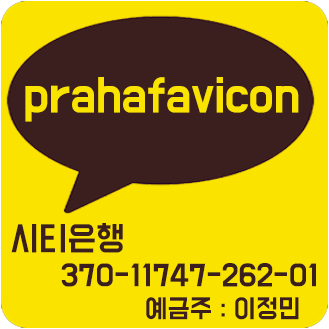
<style>
.page{position:relative;width:329px;height:329px;background:#fbe300}
.page>*{position:absolute;margin:0}
.t1{font:41.6px "BMDoHyeon";color:#fbe300}
.t2{font:30px "BMDoHyeon";color:#3b1e1e}
.t3{font:26.7px "BMDoHyeon";color:#3b1e1e}
.t4{font:23.3px "BMDoHyeon";color:#3b1e1e}
</style>
<div class="page">
<p class="t1" style="left:25px;top:77px;width:274px;height:45px">prahafavicon</p>
<p class="t2" style="left:11px;top:223px;width:112px;height:30px">시티은행</p>
<p class="t3" style="left:61px;top:263px;width:255px;height:24px">370-11747-262-01</p>
<p class="t4" style="left:146px;top:297px;width:153px;height:23px">예금주 : 이정민</p>
</div>
